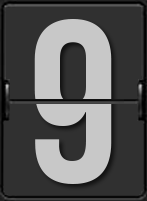
<style>
.page{position:relative;width:147px;height:201px;background:#303030}
.page>*{position:absolute;margin:0}
.t1{font:230px "BebasNeue";letter-spacing:-0.02em;color:#c8c8c8}
</style>
<div class="page">
<p class="t1" style="left:34px;top:19px;width:78px;height:165px">9</p>
</div>
